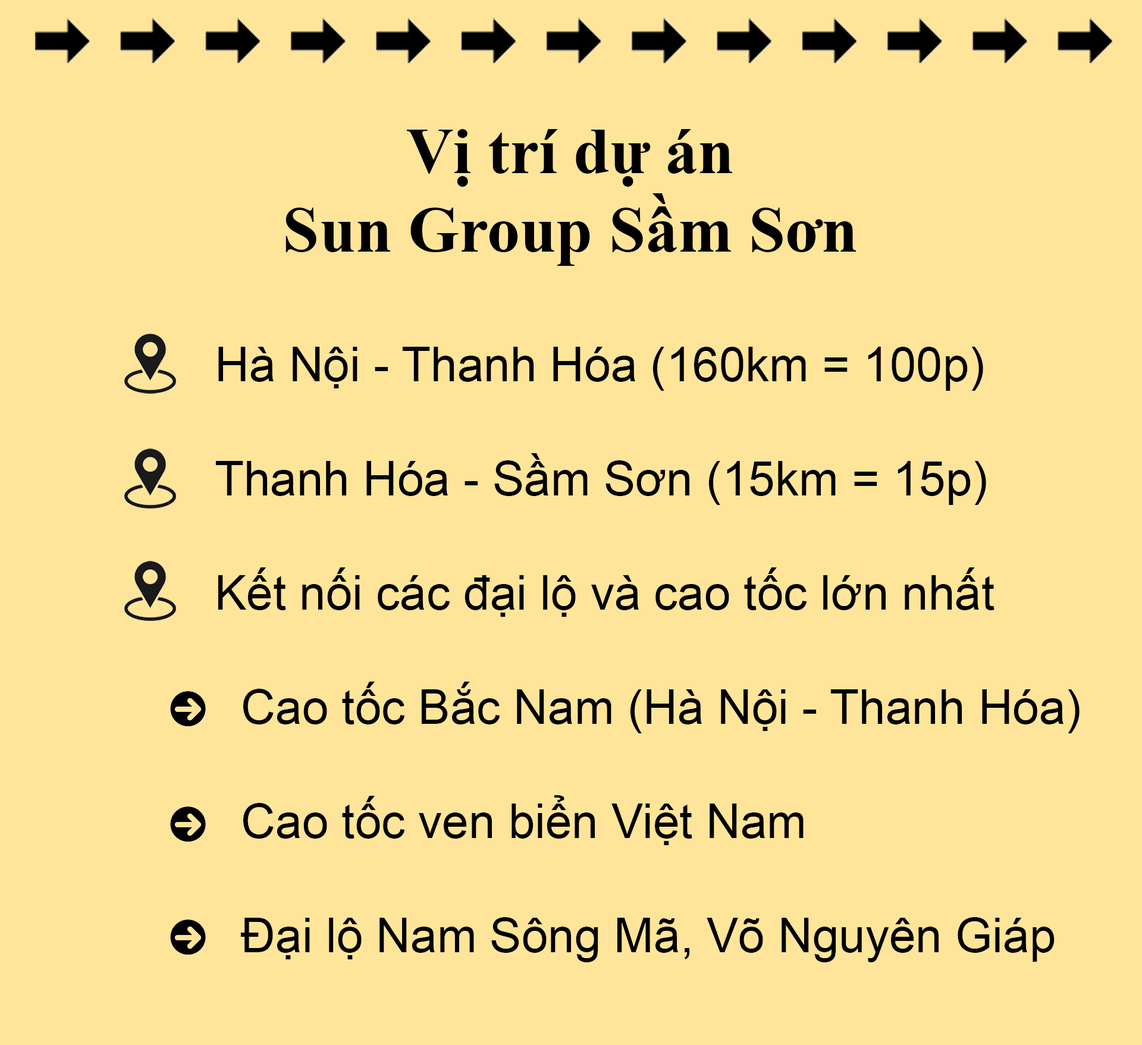
<style>
.page{position:relative;width:1142px;height:1045px;background:#ffe599}
.page>*{position:absolute;margin:0}
.t1{font:65.4px "TimesNewRomanPS-BoldMT";color:#000000}
.t2{font:47.6px "ArialMT";color:#000000}
</style>
<div class="page">
<p class="t1" style="left:285px;top:129px;width:571px;height:137px;text-align:center">Vị trí dự án<br>Sun Group Sầm Sơn</p>
<p class="t2" style="left:215px;top:347px;width:864px;height:615px">Hà Nội - Thanh Hóa (160km = 100p)<br><br>Thanh Hóa - Sầm Sơn (15km = 15p)<br><br>Kết nối các đại lộ và cao tốc lớn nhất<br><br>  Cao tốc Bắc Nam (Hà Nội - Thanh Hóa)<br><br>  Cao tốc ven biển Việt Nam<br><br>  Đại lộ Nam Sông Mã, Võ Nguyên Giáp</p>
</div>
